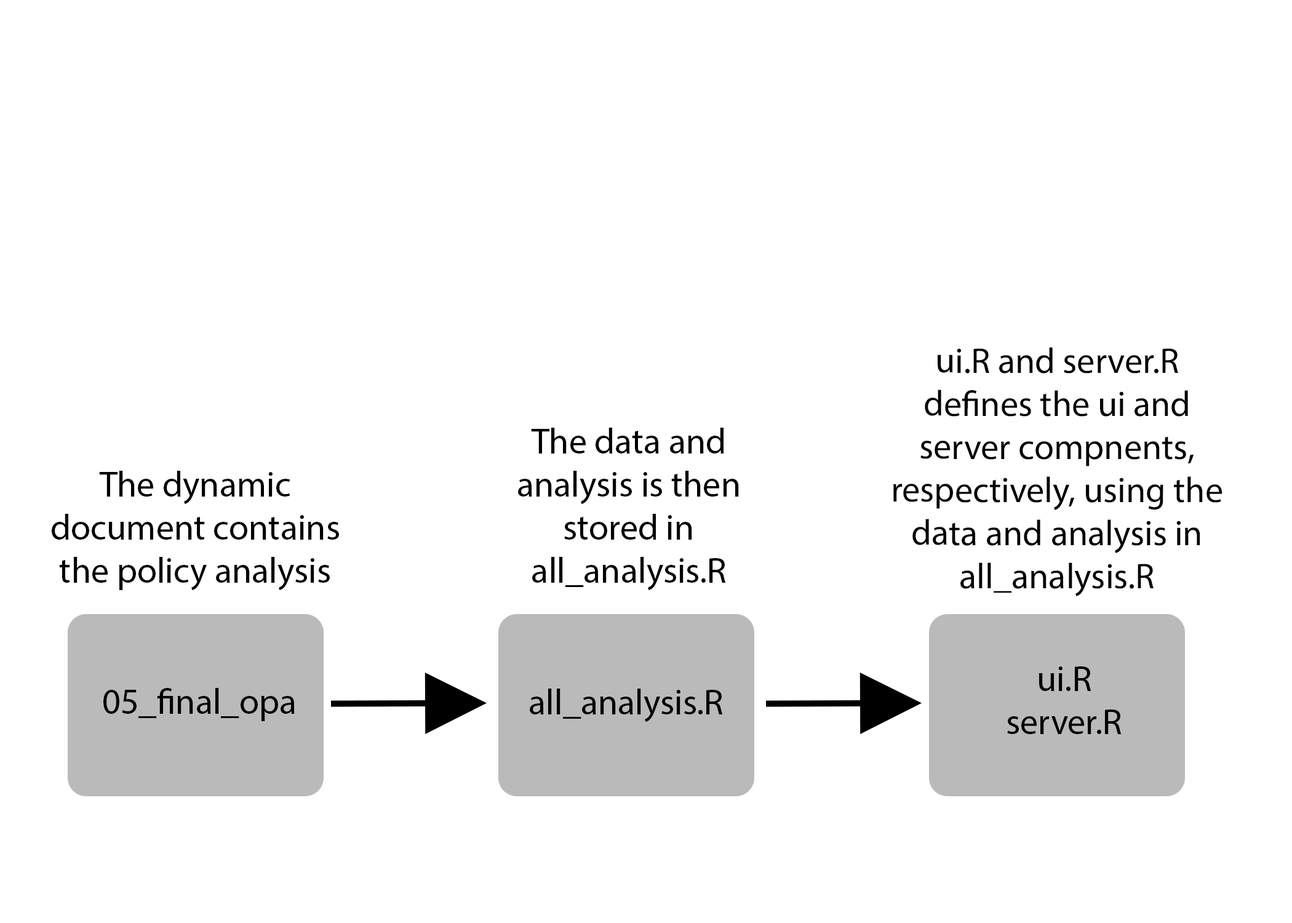
<style>
.page{position:relative;width:1292px;height:923px;background:#ffffff}
.page>*{position:absolute;margin:0}
.t1{font:35.9px "MyriadPro-Regular";color:#000000}
.t2{font:35.8px "MyriadPro-Regular";color:#000000}
</style>
<div class="page">
<p class="t1" style="left:893px;top:347px;width:330px;height:249px;text-align:center">ui.R and server.R defines the ui and server compnents, respectively, using the data and analysis in  all_analysis.R</p>
<p class="t1" style="left:518px;top:428px;width:221px;height:163px;text-align:center">The data and analysis is then stored in all_analysis.R</p>
<p class="t2" style="left:52px;top:471px;width:287px;height:119px;text-align:center">The dynamic document contains the policy analysis</p>
<p class="t1" style="left:1007px;top:666px;width:115px;height:68px;text-align:center">ui.R <br>server.R</p>
<p class="t1" style="left:103px;top:688px;width:192px;height:33px">05_final_opa</p>
<p class="t1" style="left:530px;top:688px;width:193px;height:34px">all_analysis.R</p>
</div>
